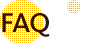
<style>
.page{position:relative;width:102px;height:44px;background:#ffffff}
.page>*{position:absolute;margin:0}
.t1{font:28px "KievitPro-Medium";letter-spacing:-0.025em;color:#29170a}
</style>
<div class="page">
<p class="t1" style="left:2px;top:13px;width:48px;height:24px">FAQ</p>
</div>
